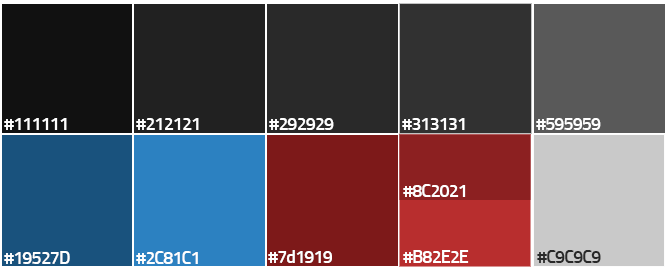
<style>
.page{position:relative;width:670px;height:270px}
.page>*{position:absolute;margin:0}
.t1{font:18px "Titillium-Semibold";letter-spacing:-0.05em;color:#ffffff}
.t2{font:18px "Titillium-Semibold";letter-spacing:-0.05em;color:#282828}
</style>
<div class="page">
<p class="t1" style="left:4px;top:118px;width:63px;height:12px">#111111</p>
<p class="t1" style="left:136px;top:118px;width:63px;height:12px">#212121</p>
<p class="t1" style="left:269px;top:118px;width:65px;height:12px">#292929</p>
<p class="t1" style="left:402px;top:118px;width:63px;height:12px">#313131</p>
<p class="t1" style="left:536px;top:118px;width:65px;height:12px">#595959</p>
<p class="t1" style="left:403px;top:184px;width:63px;height:13px">#8C2021</p>
<p class="t1" style="left:4px;top:251px;width:66px;height:13px">#19527D</p>
<p class="t1" style="left:136px;top:251px;width:62px;height:13px">#2C81C1</p>
<p class="t1" style="left:268px;top:250px;width:64px;height:13px">#7d1919</p>
<p class="t1" style="left:403px;top:250px;width:66px;height:13px">#B82E2E</p>
<p class="t2" style="left:537px;top:250px;width:64px;height:13px">#C9C9C9</p>
</div>
